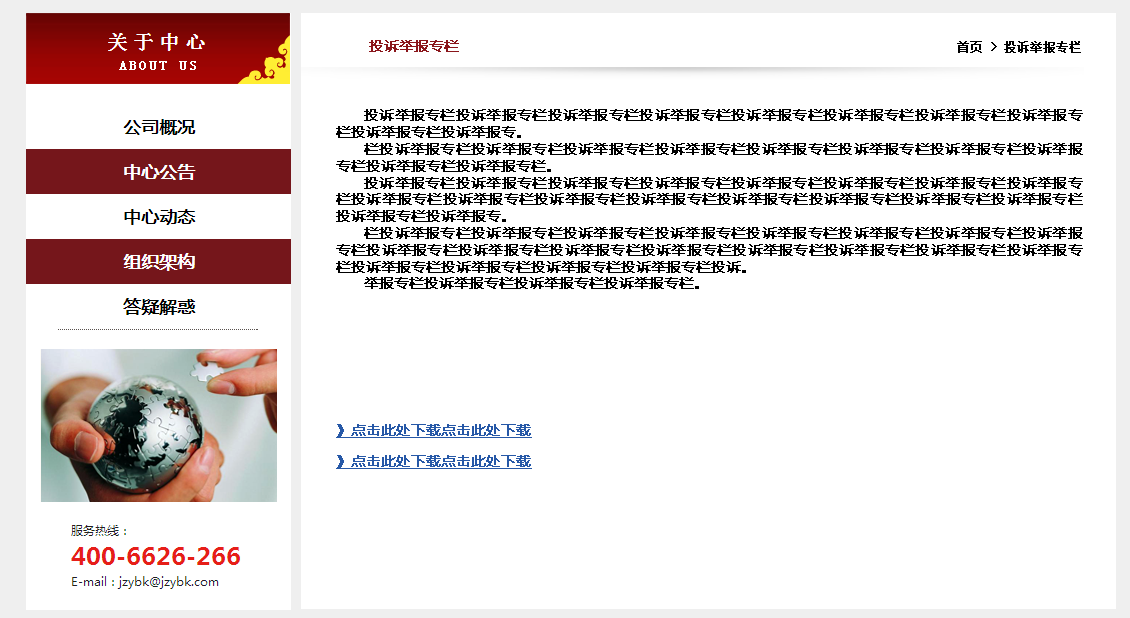
<style>
.page{position:relative;width:1130px;height:618px;background:#ffffff}
.page>*{position:absolute;margin:0}
.t1{font:14px "MicrosoftYaHei";color:#8a161b;font-weight:bold}
.t2{font:12px "SimSun";color:#000000;font-weight:bold}
.t3{font:14px "MicrosoftYaHei";color:#000000;font-weight:bold}
.t4{font:14px "MicrosoftYaHei";color:#2658a7;font-weight:bold;text-decoration:underline}
</style>
<div class="page">
<p class="t1" style="left:369px;top:40px;width:90px;height:12px">投诉举报专栏</p>
<p class="t2" style="left:957px;top:41px;width:124px;height:12px">首页 &gt; 投诉举报专栏</p>
<p class="t3" style="left:336px;top:109px;width:747px;height:180px;text-align:justify">投诉举报专栏投诉举报专栏投诉举报专栏投诉举报专栏投诉举报专栏投诉举报专栏投诉举报专栏投诉举报专栏投诉举报专栏投诉举报专。<br>栏投诉举报专栏投诉举报专栏投诉举报专栏投诉举报专栏投诉举报专栏投诉举报专栏投诉举报专栏投诉举报专栏投诉举报专栏投诉举报专栏。<br>投诉举报专栏投诉举报专栏投诉举报专栏投诉举报专栏投诉举报专栏投诉举报专栏投诉举报专栏投诉举报专栏投诉举报专栏投诉举报专栏投诉举报专栏投诉举报专栏投诉举报专栏投诉举报专栏投诉举报专栏投诉举报专栏投诉举报专栏投诉举报专。<br>栏投诉举报专栏投诉举报专栏投诉举报专栏投诉举报专栏投诉举报专栏投诉举报专栏投诉举报专栏投诉举报专栏投诉举报专栏投诉举报专栏投诉举报专栏投诉举报专栏投诉举报专栏投诉举报专栏投诉举报专栏投诉举报专栏投诉举报专栏投诉举报专栏投诉举报专栏投诉举报专栏投诉。<br>举报专栏投诉举报专栏投诉举报专栏投诉举报专栏。</p>
<p class="t4" style="left:336px;top:424px;width:196px;height:14px">》点击此处下载点击此处下载</p>
<p class="t4" style="left:336px;top:455px;width:196px;height:14px">》点击此处下载点击此处下载</p>
</div>
